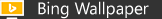
<style>
.page{position:relative;width:162px;height:19px;background:#333333}
.page>*{position:absolute;margin:0}
.t1{font:16.7px "SegoeUI";color:#ffffff}
</style>
<div class="page">
<p class="t1" style="left:38px;top:1px;width:111px;height:18px">Bing Wallpaper</p>
</div>
